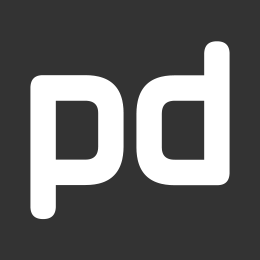
<style>
.page{position:relative;width:260px;height:260px;background:#333333}
.page>*{position:absolute;margin:0}
.t1{font:173.3px "AirstripFour";color:#ffffff}
</style>
<div class="page">
<p class="t1" style="left:136px;top:41px;width:94px;height:145px">d</p>
<p class="t1" style="left:30px;top:75px;width:94px;height:145px">P</p>
</div>
